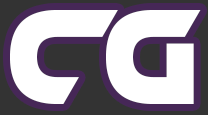
<style>
.page{position:relative;width:208px;height:115px;background:#ffffff}
.page>*{position:absolute;margin:0}
.t1{font:138.1px "FastHand";color:#ffffff}
</style>
<div class="page">
<p class="t1" style="left:10px;top:10px;width:191px;height:94px">cg</p>
</div>
